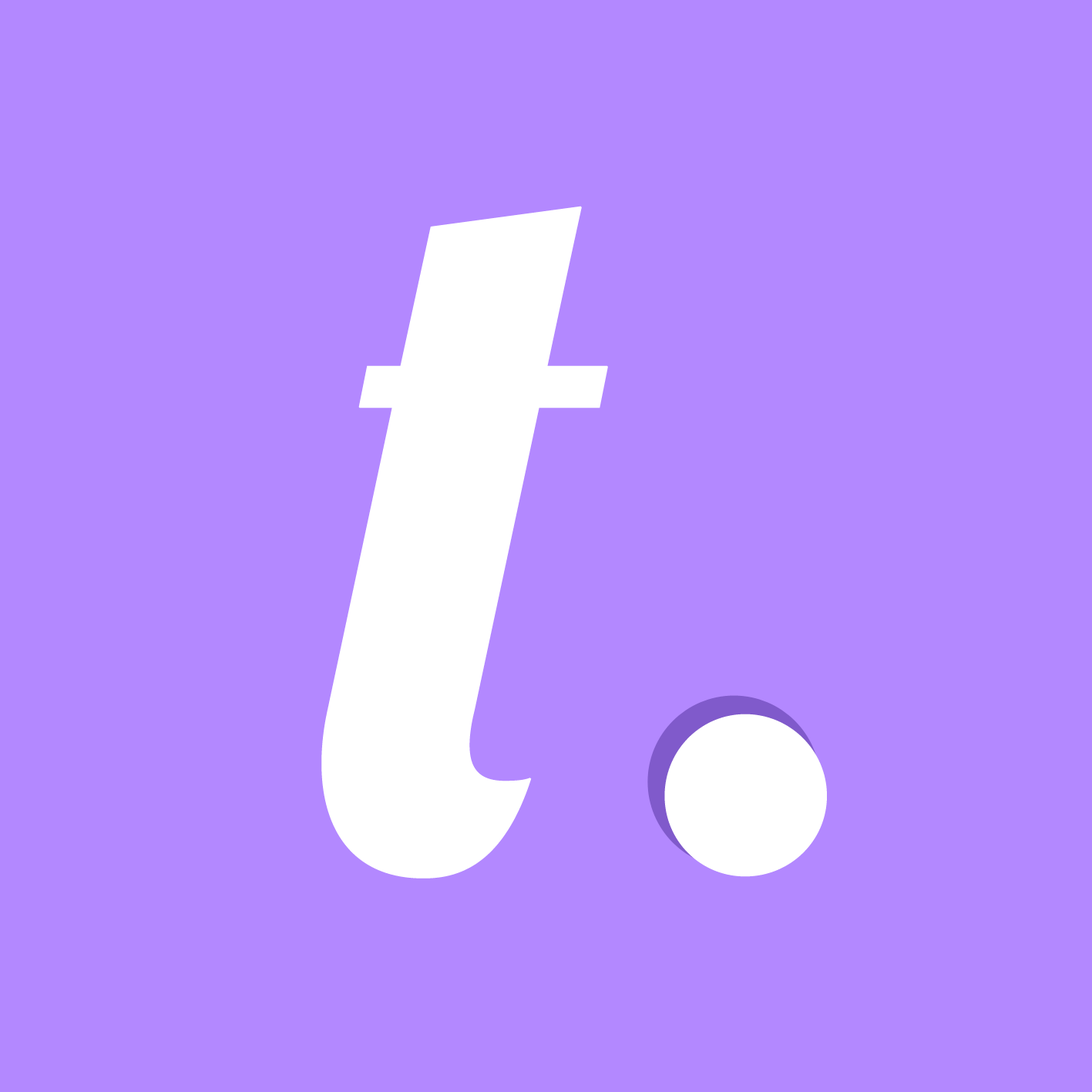
<style>
.page{position:relative;width:1092px;height:1092px;background:#b388ff}
.page>*{position:absolute;margin:0}
.t1{font:1010px "Lobster1.4";color:#ffffff;font-weight:bold}
</style>
<div class="page">
<p class="t1" style="left:321px;top:206px;width:506px;height:673px">t.</p>
</div>
